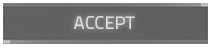
<style>
.page{position:relative;width:212px;height:48px;background:#616161}
.page>*{position:absolute;margin:0}
.t1{font:18px "Titillium-Regular";color:#dddfde;text-transform:uppercase}
</style>
<div class="page">
<p class="t1" style="left:74px;top:16px;width:61px;height:13px">ACCEPT</p>
</div>
